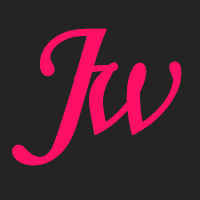
<style>
.page{position:relative;width:200px;height:200px;background:#242424}
.page>*{position:absolute;margin:0}
.t1{font:190px "MonotypeCorsiva";color:#ff0f65;font-weight:bold}
.t2{font:159px "MonotypeCorsiva";color:#ff0f65;font-weight:bold}
</style>
<div class="page">
<p class="t1" style="left:12px;top:28px;width:95px;height:138px">J</p>
<p class="t2" style="left:74px;top:61px;width:108px;height:74px">w</p>
</div>
